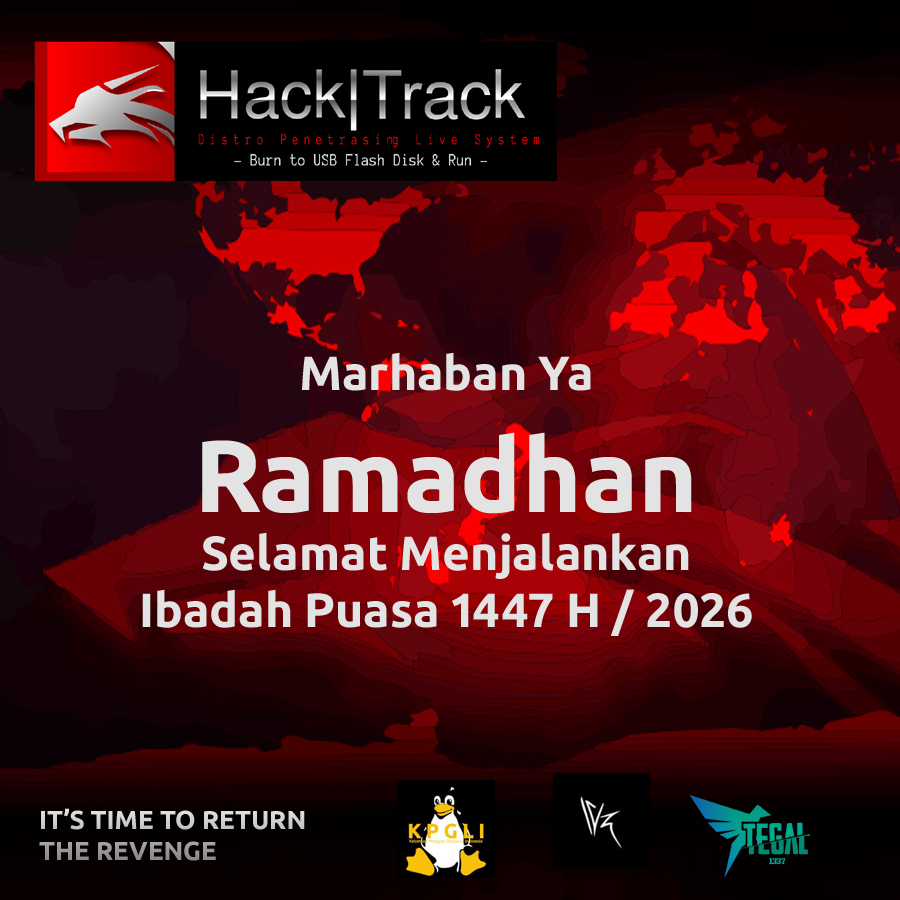
<style>
.page{position:relative;width:900px;height:900px}
.page>*{position:absolute;margin:0}
.t1{font:47.9px "Ubuntu-Bold";color:#e3e3e3}
.t2{font:101.9px "Ubuntu-Bold";color:#e3e3e3}
.t3{font:25.9px "Ubuntu-Bold"}
</style>
<div class="page">
<p class="t1" style="left:142px;top:352px;width:610px;height:284px;text-align:center">Marhaban Ya<br><span class="t2">Ramadhan<br></span>Selamat Menjalankan<br>Ibadah Puasa 1447 H / 2026</p>
<p class="t3" style="left:39px;top:808px;width:266px;height:53px">IT’S TIME TO RETURN<br>THE REVENGE</p>
</div>
